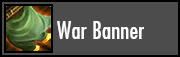
<style>
.page{position:relative;width:180px;height:57px;background:#4c4c4c}
.page>*{position:absolute;margin:0}
.t1{font:24px "FuturaCondensed";color:#ffffff}
</style>
<div class="page">
<p class="t1" style="left:57px;top:21px;width:87px;height:18px">War Banner</p>
</div>
